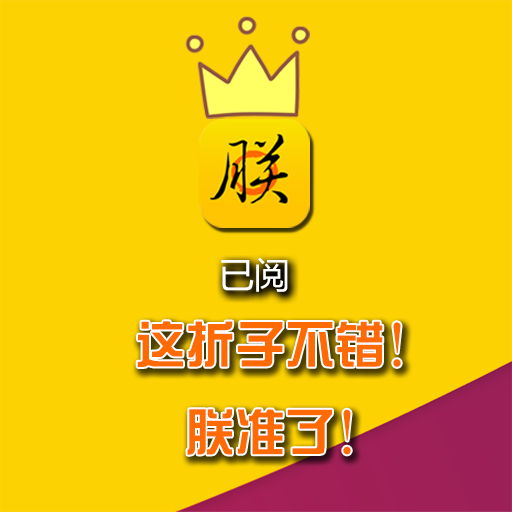
<style>
.page{position:relative;width:512px;height:512px;background:#fcd202}
.page>*{position:absolute;margin:0}
.t1{font:35.4px "MicrosoftYaHei";color:#ffffff}
.t2{font:50px "HYk1gj";color:#fe6a03}
</style>
<div class="page">
<p class="t1" style="left:221px;top:257px;width:67px;height:35px">已阅</p>
<p class="t2" style="left:137px;top:321px;width:264px;height:134px;text-align:center">这折子不错！<br>朕准了！</p>
</div>
